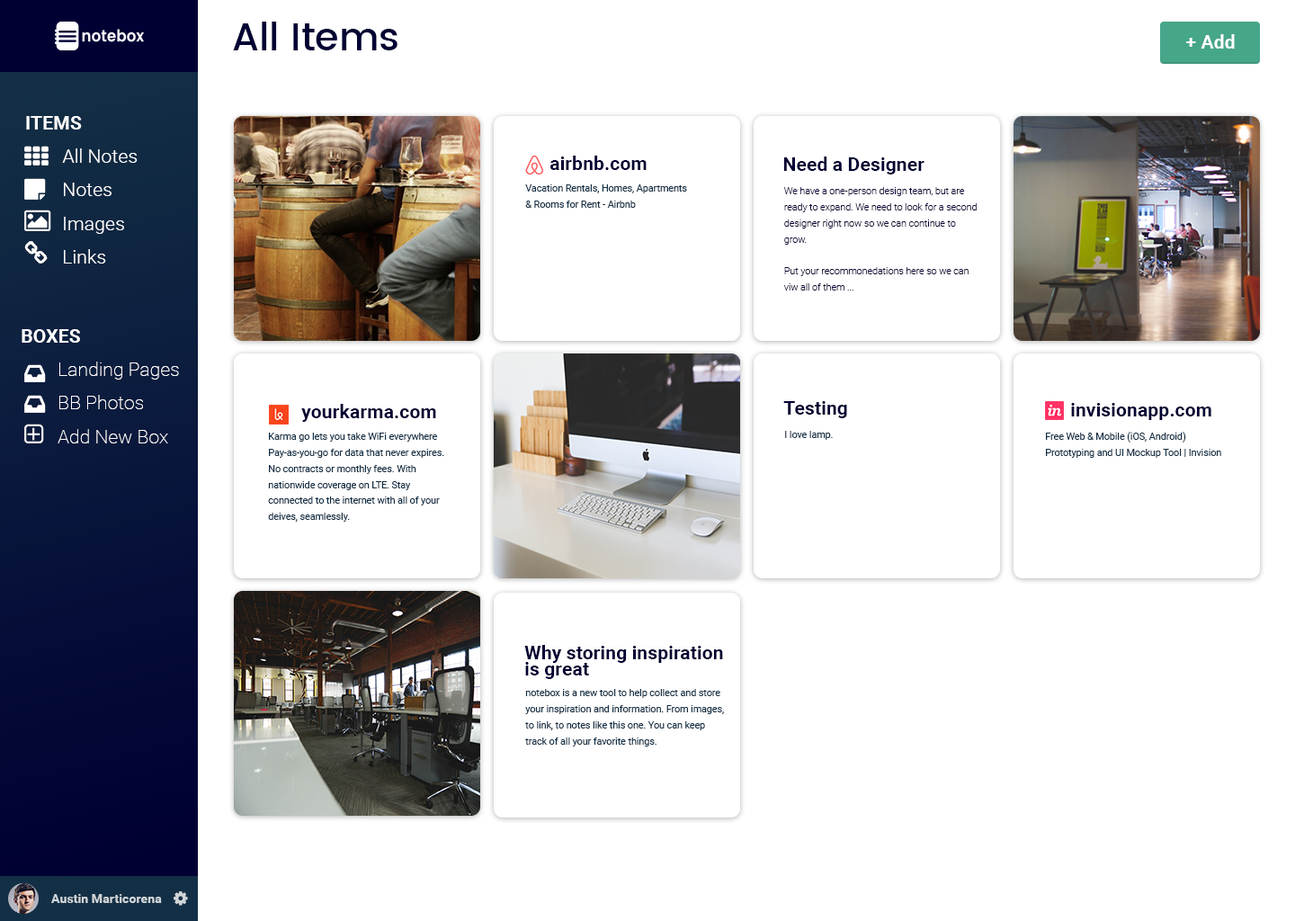
<style>
.page{position:relative;width:1295px;height:921px;background:#ffffff}
.page>*{position:absolute;margin:0}
.t1{font:38.4px "Poppins-Medium";color:#000033}
.t2{font:19.2px "Roboto-Bold";color:#ffffff}
.t3{font:19.2px/33.6px "Roboto-Light";color:#ffffff}
.t4{font:10.8px/33.6px "Roboto-Bold";color:#ffffff}
.t5{font:10.8px "Roboto-Bold";color:#000033}
.t6{font:9.6px/16px "Roboto-Regular";color:#132f45}
.t7{font:9.6px/16px "Roboto-Light";color:#000033}
.t8{font:10.8px/33.6px "Roboto-Thin";color:#ffffff}
.t9{font:9.6px "Roboto-Regular";color:#132f45}
.t10{font:10.8px/16px "Roboto-Bold";color:#000033}
.t11{font:12.8px "Roboto-Bold";color:#d0d5d8}
</style>
<div class="page">
<p class="t1" style="left:233px;top:22px;width:164px;height:28px">All Items</p>
<p class="t2" style="left:1186px;top:34px;width:49px;height:15px">+ Add</p>
<p class="t3" style="left:26px;top:116px;width:112px;height:147px"><span class="t4">ITEMS<br>  </span>All Notes<br>  Notes<br>  Images<br>  Links</p>
<p class="t5" style="left:550px;top:156px;width:97px;height:14px">airbnb.com</p>
<p class="t5" style="left:783px;top:156px;width:141px;height:18px">Need a Designer</p>
<p class="t6" style="left:525px;top:184px;width:162px;height:24px">Vacation Rentals, Homes, Apartments <br>&amp; Rooms for Rent - Airbnb</p>
<p class="t7" style="left:783px;top:187px;width:194px;height:103px">We have a one-person design team, but are<br>ready to expand. We need to look for a second<br>designer right now so we can continue to<br>grow.<br><br>Put your recommonedations here so we can<br>viw all of them ...</p>
<p class="t8" style="left:22px;top:329px;width:157px;height:114px"><span class="t4">BOXES<br> </span> Landing Pages<br>  BB Photos<br>  Add New Box</p>
<p class="t5" style="left:783px;top:401px;width:64px;height:17px">Testing</p>
<p class="t5" style="left:301px;top:404px;width:135px;height:18px">yourkarma.com</p>
<p class="t5" style="left:1071px;top:403px;width:140px;height:17px">invisionapp.com</p>
<p class="t6" style="left:268px;top:433px;width:176px;height:89px">Karma go lets you take WiFi everywhere<br>Pay-as-you-go for data that never expires.<br>No contracts or monthly fees. With<br>nationwide coverage on LTE. Stay<br>connected to the internet with all of your <br>deives, seamlessly.</p>
<p class="t9" style="left:785px;top:431px;width:48px;height:9px">I love lamp.</p>
<p class="t6" style="left:1046px;top:432px;width:175px;height:26px">Free Web &amp; Mobile (iOS, Android)<br>Prototyping and UI Mockup Tool | Invision</p>
<p class="t10" style="left:524px;top:645px;width:199px;height:34px">Why storing inspiration<br>is great</p>
<p class="t6" style="left:525px;top:689px;width:199px;height:57px">notebox is a new tool to help collect and store<br>your inspiration and information. From images,<br>to link, to notes like this one. You can keep<br>track of all your favorite things.</p>
<p class="t11" style="left:51px;top:894px;width:111px;height:9px">Austin Marticorena</p>
</div>
